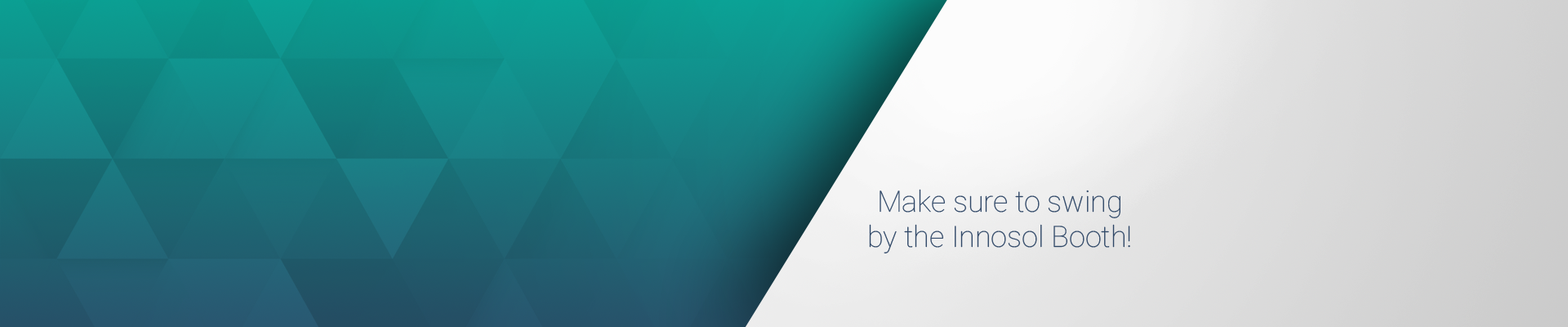
<style>
.page{position:relative;width:1568px;height:327px}
.page>*{position:absolute;margin:0}
.t1{font:29.4px "Roboto-Thin";color:#2e4666}
</style>
<div class="page">
<p class="t1" style="left:869px;top:189px;width:261px;height:64px;text-align:center">Make sure to swing<br>by the Innosol Booth!</p>
</div>
